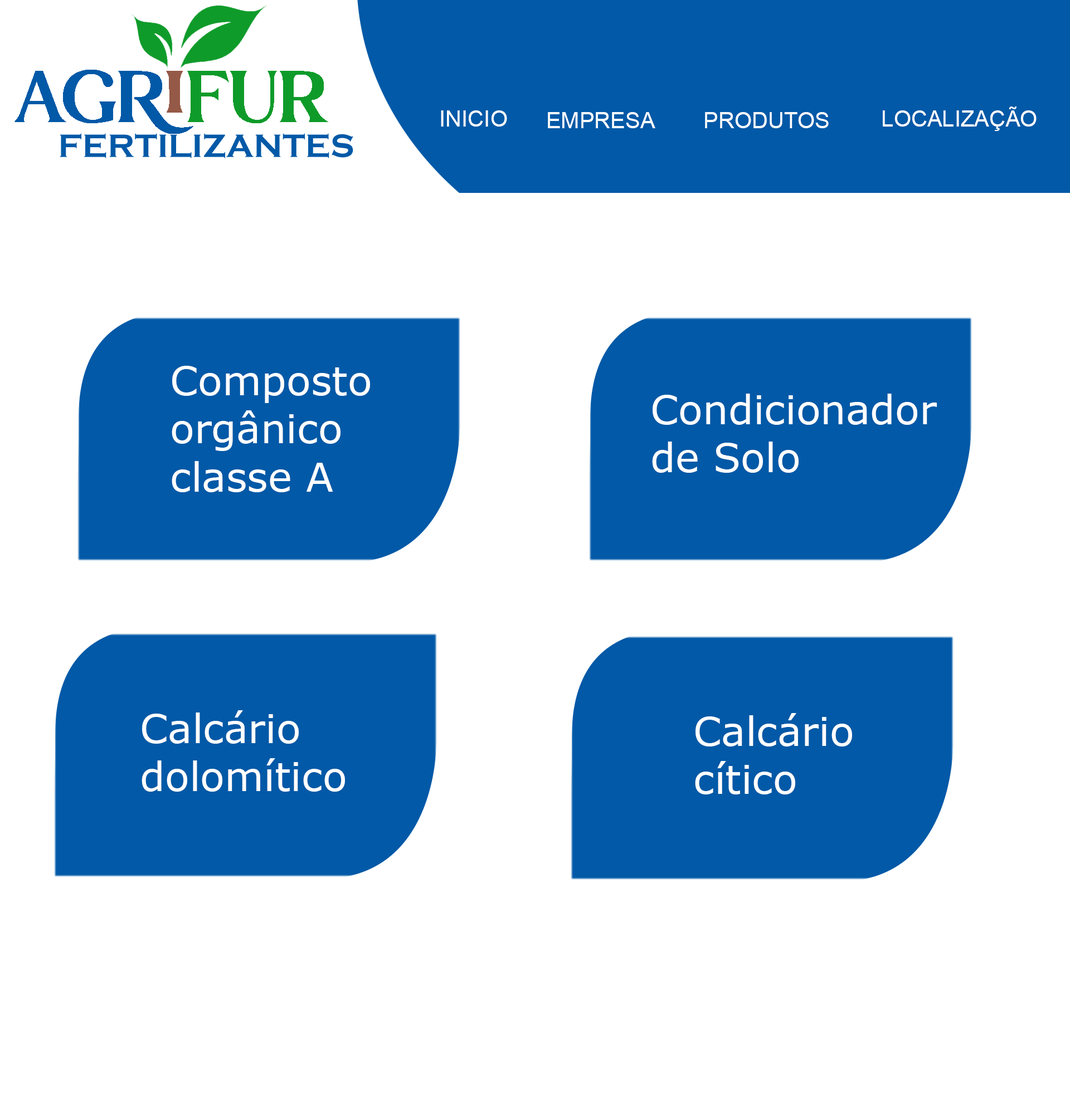
<style>
.page{position:relative;width:1070px;height:1115px;background:#ffffff}
.page>*{position:absolute;margin:0}
.t1{font:40.1px "MSReferenceSansSerif";color:#ffffff}
</style>
<div class="page">
<p class="t1" style="left:172px;top:366px;width:198px;height:126px">Composto orgânico classe A</p>
<p class="t1" style="left:652px;top:393px;width:285px;height:80px">Condicionador <br>de Solo</p>
<p class="t1" style="left:142px;top:710px;width:203px;height:81px">Calcário <br>dolomítico</p>
<p class="t1" style="left:695px;top:713px;width:157px;height:81px">Calcário <br>cítico</p>
</div>
